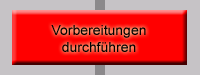
<style>
.page{position:relative;width:200px;height:75px;background:#c6c3c6}
.page>*{position:absolute;margin:0}
.t1{font:14px "ArialMT";color:#000000}
</style>
<div class="page">
<p class="t1" style="left:51px;top:25px;width:95px;height:27px;text-align:center">Vorbereitungen<br>durchführen</p>
</div>
